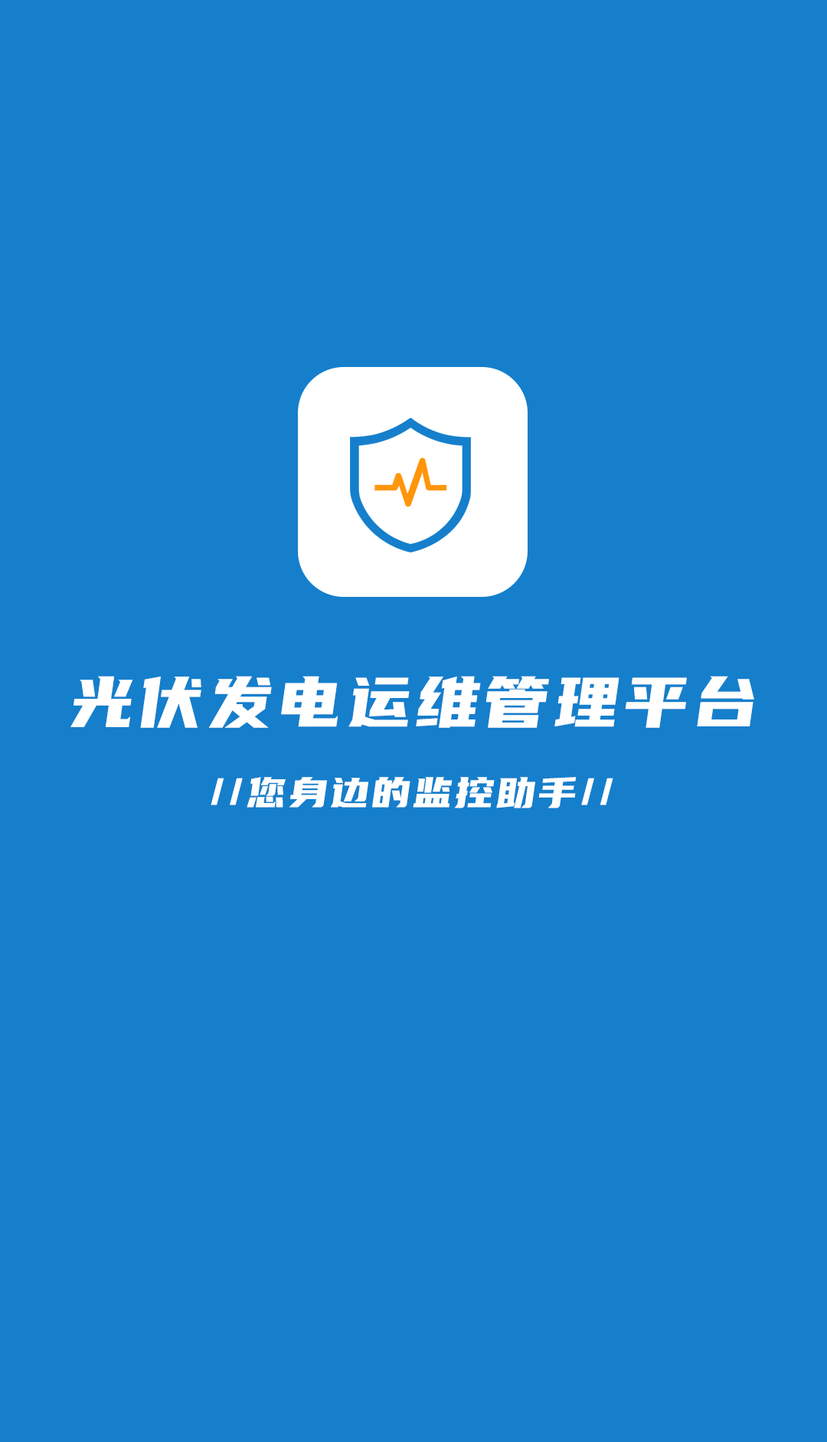
<style>
.page{position:relative;width:827px;height:1442px;background:#157fcc}
.page>*{position:absolute;margin:0}
.t1{font:71.5px "YouSheBiaoTiHei";letter-spacing:0.05em;color:#ffffff}
.t2{font:42.9px "YouSheBiaoTiHei";letter-spacing:0.05em;color:#ffffff}
</style>
<div class="page">
<p class="t1" style="left:70px;top:676px;width:684px;height:52px">光伏发电运维管理平台</p>
<p class="t2" style="left:211px;top:777px;width:403px;height:31px">//您身边的监控助手//</p>
</div>
